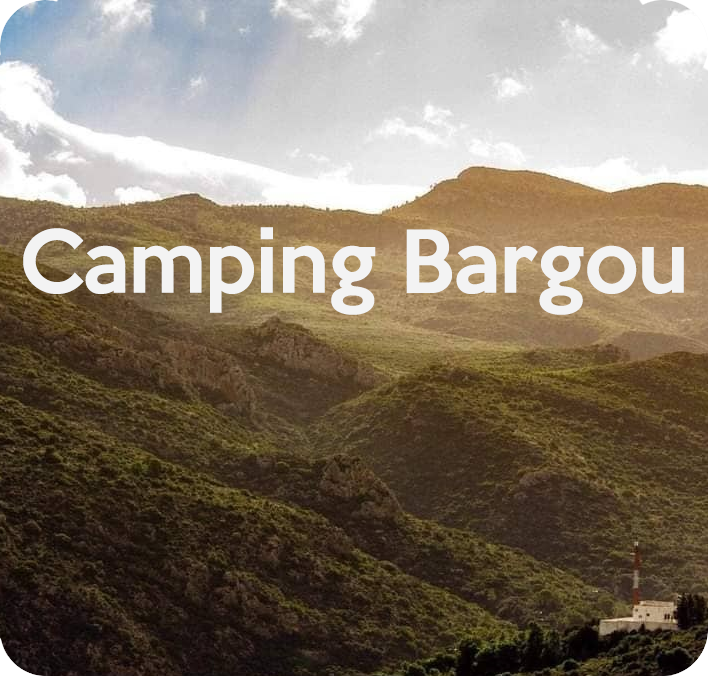
<style>
.page{position:relative;width:708px;height:676px}
.page>*{position:absolute;margin:0}
.t1{font:79px "KeepCalm-Medium";color:#f3f3f3}
</style>
<div class="page">
<p class="t1" style="left:23px;top:227px;width:661px;height:88px">Camping Bargou</p>
</div>
